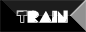
<style>
.page{position:relative;width:86px;height:32px;background:#000000}
.page>*{position:absolute;margin:0}
.t1{font:12px "PacFont";color:#ffffff}
</style>
<div class="page">
<p class="t1" style="left:16px;top:10px;width:52px;height:13px">Train</p>
</div>
